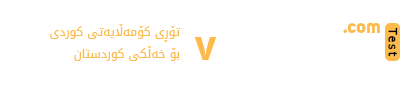
<style>
.page{position:relative;width:400px;height:90px;background:#ffffff}
.page>*{position:absolute;margin:0}
.t1{font:12px "DroidArabicKufi";color:#fdba4d}
.t2{font:19.3px "Uni-Sans-Bold";color:#fdba4d}
.t3{font:11px "Tahoma";color:#000000;font-weight:bold}
.t4{font:43.3px "Uni-Sans-Bold";color:#fdba4d}
</style>
<div class="page">
<p class="t1" style="left:50px;top:24px;width:131px;height:37px;text-align:right">تۆڕی کۆمەڵایەتی کوردی<br>بۆ خەڵکی کوردستان</p>
<p class="t2" style="left:343px;top:22px;width:37px;height:11px">.com</p>
<p class="t3" style="left:388px;top:27px;width:10px;height:30px;rotate:90deg">Test</p>
<p class="t4" style="left:194px;top:37px;width:23px;height:23px">v</p>
</div>
